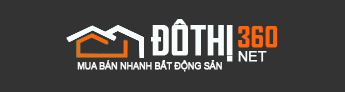
<style>
.page{position:relative;width:345px;height:92px;background:#333333}
.page>*{position:absolute;margin:0}
.t1{font:38.6px "SVN-AgencyFBbold";color:#f9fcfc;text-transform:uppercase;font-weight:bold}
.t2{font:14px "ArialMT";color:#f9fcfc;text-transform:uppercase;font-weight:bold}
.t3{font:8.6px "ArialMT";color:#f6f7f7;text-transform:uppercase;font-weight:bold}
</style>
<div class="page">
<p class="t1" style="left:151px;top:19px;width:82px;height:43px">ĐÔTHỊ</p>
<p class="t2" style="left:238px;top:51px;width:29px;height:11px">NET</p>
<p class="t3" style="left:77px;top:60px;width:145px;height:12px">MUA BÁN NHANH BẤT ĐỘNG SẢN</p>
</div>
